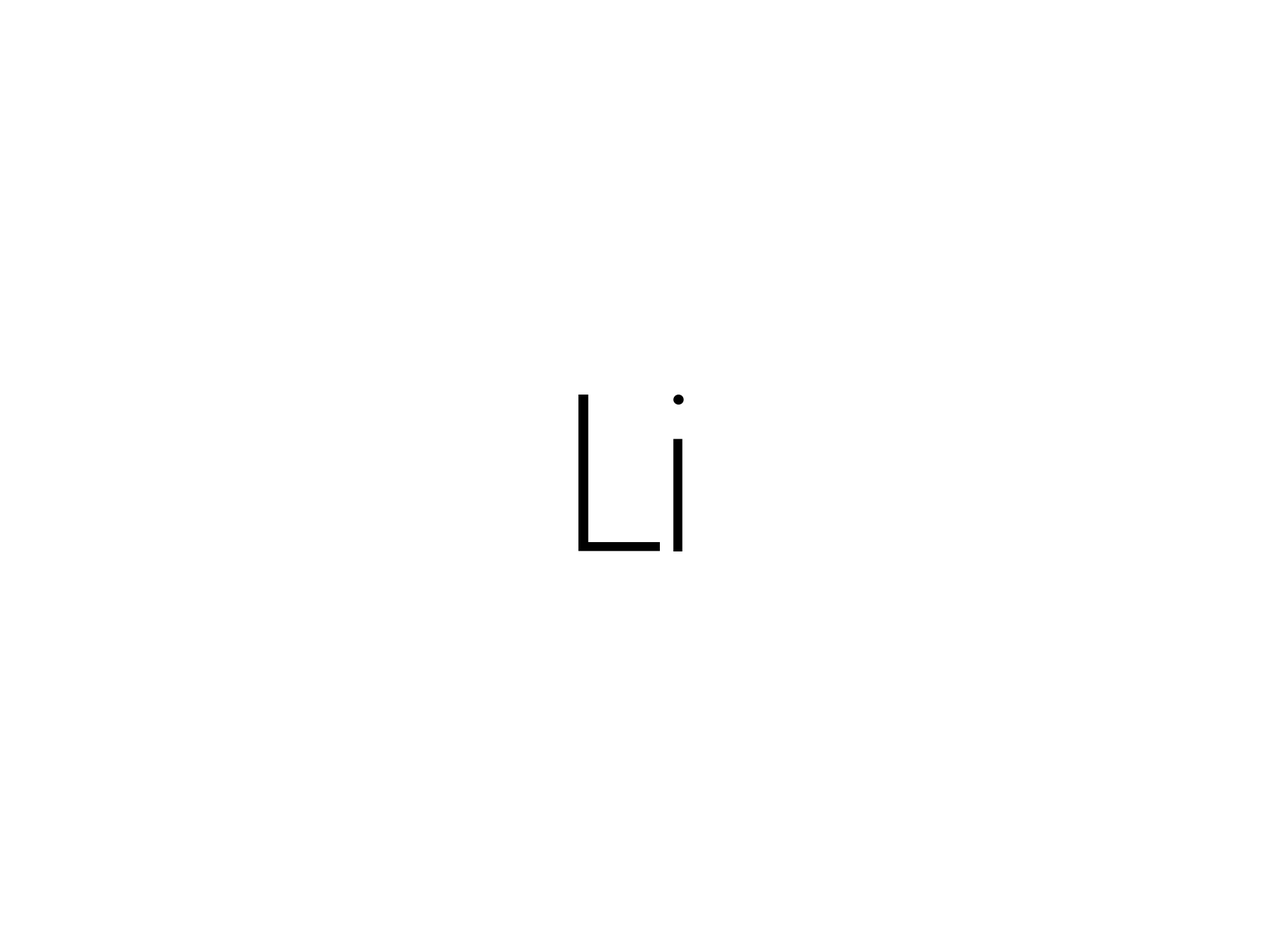
<style>
.page{position:relative;width:1261px;height:946px;background:#ffffff}
.page>*{position:absolute;margin:0}
.t1{font:222.4px "Alcubierre";color:#000000}
</style>
<div class="page">
<p class="t1" style="left:578px;top:394px;width:106px;height:157px">Li</p>
</div>
